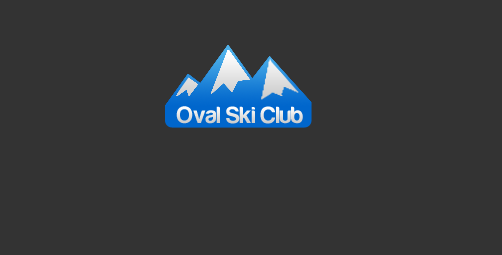
<style>
.page{position:relative;width:502px;height:255px;background:#333333}
.page>*{position:absolute;margin:0}
.t1{font:24px "Harabara";color:#e4e4e4}
</style>
<div class="page">
<p class="t1" style="left:176px;top:106px;width:127px;height:18px">Oval Ski Club</p>
</div>
